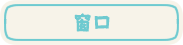
<style>
.page{position:relative;width:183px;height:45px;background:#f7f3e9}
.page>*{position:absolute;margin:0}
.t1{font:12px "shetumodengxiaofangti";color:#6ecad0;font-weight:bold;scale:0.94 1}
</style>
<div class="page">
<p class="t1" style="left:74px;top:13px;width:36px;height:19px">窗口</p>
</div>
